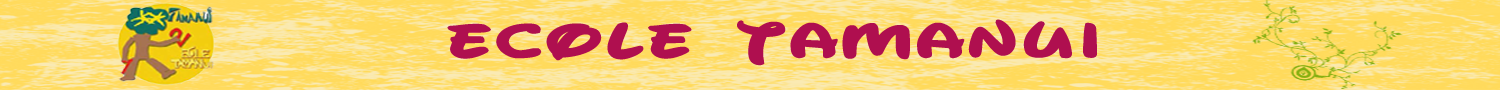
<style>
.page{position:relative;width:1500px;height:90px}
.page>*{position:absolute;margin:0}
.t1{font:46.6px "WaltographUI-Bold";letter-spacing:0.025em;color:#af0f4f;font-weight:bold;scale:1.61 1}
</style>
<div class="page">
<p class="t1" style="left:447px;top:19px;width:650px;height:47px">Ecole TAMANUI</p>
</div>
